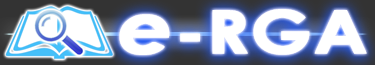
<style>
.page{position:relative;width:375px;height:65px;background:#ffffff}
.page>*{position:absolute;margin:0}
.t1{font:60px "CenturyGothic-Bold";color:#ffffff;font-weight:bold;scale:1.2 1}
.t2{font:71.1px "CenturyGothic-BoldItalic";color:#ffffff;font-weight:bold;scale:1.2 1}
</style>
<div class="page">
<p class="t1" style="left:119px;top:9px;width:248px;height:46px"><span class="t2">e</span>-RGA</p>
</div>
